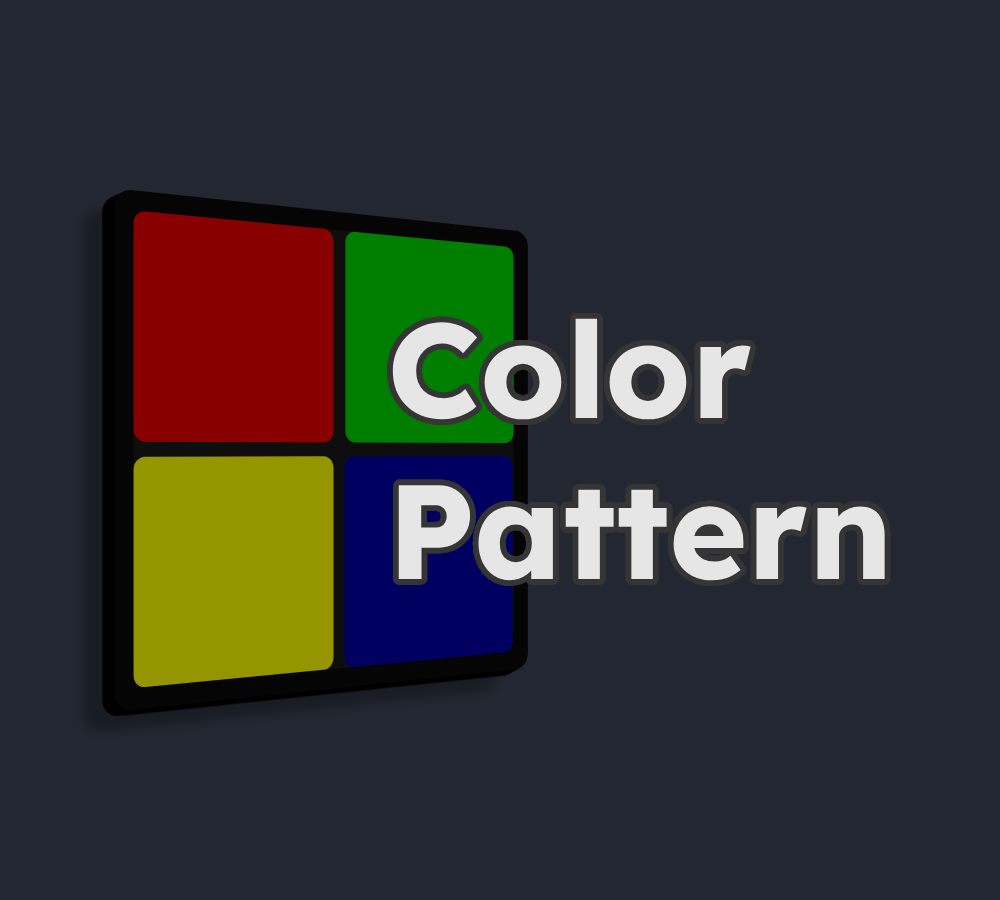
<style>
.page{position:relative;width:1000px;height:900px;background:#222731}
.page>*{position:absolute;margin:0}
.t1{font:134px "Lexend-Bold";color:#e6e6e6}
</style>
<div class="page">
<p class="t1" style="left:392px;top:318px;width:493px;height:263px">Color<br>Pattern</p>
</div>
